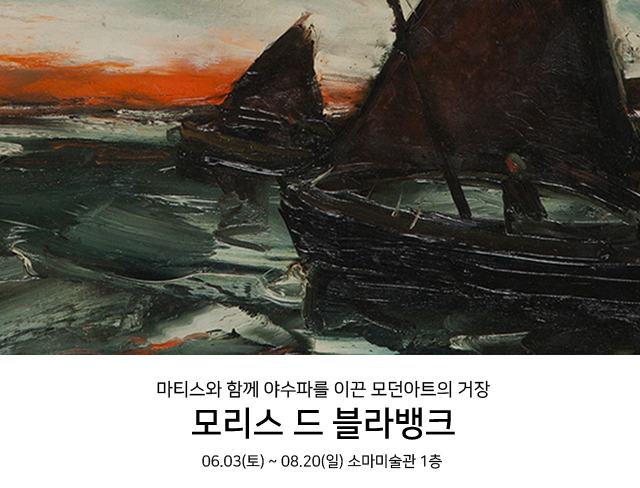
<style>
.page{position:relative;width:640px;height:488px;background:#ffffff}
.page>*{position:absolute;margin:0}
.t1{font:18px "NanumSquareR";color:#000000}
.t2{font:34px "NanumSquareB";color:#000000}
.t3{font:15px "NanumSquareR";color:#000000}
</style>
<div class="page">
<p class="t1" style="left:157px;top:380px;width:333px;height:19px">마티스와 함께 야수파를 이끈 모던아트의 거장</p>
<p class="t2" style="left:192px;top:407px;width:263px;height:33px">모리스 드 블라뱅크</p>
<p class="t3" style="left:202px;top:454px;width:240px;height:15px">06.03(토) ~ 08.20(일) 소마미술관 1층</p>
</div>
